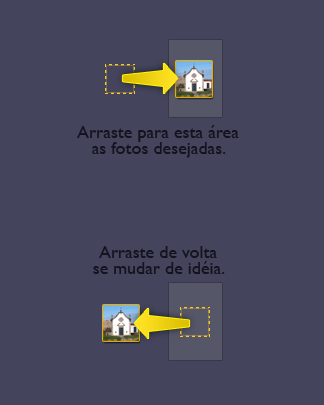
<style>
.page{position:relative;width:324px;height:405px;background:#44445d}
.page>*{position:absolute;margin:0}
.t1{font:18px/16.4px "GillSansMT";color:#141420}
</style>
<div class="page">
<p class="t1" style="left:77px;top:125px;width:162px;height:33px;text-align:center">Arraste para esta área<br>as fotos desejadas.</p>
<p class="t1" style="left:93px;top:246px;width:132px;height:28px;text-align:center">Arraste de volta<br>se mudar de idéia.</p>
</div>
